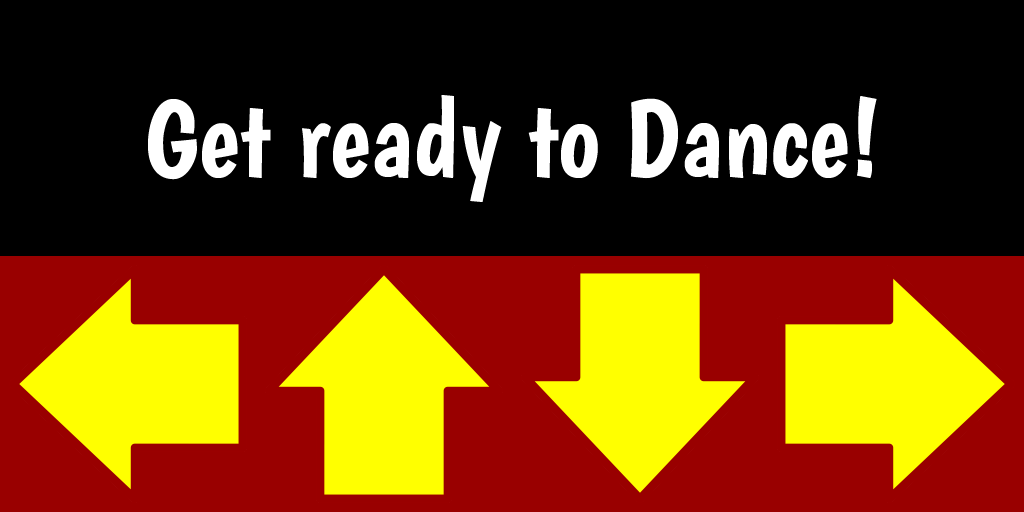
<style>
.page{position:relative;width:1024px;height:512px;background:#000000}
.page>*{position:absolute;margin:0}
.t1{font:110px "Boogaloo-Regular";color:#ffffff}
</style>
<div class="page">
<p class="t1" style="left:148px;top:95px;width:729px;height:107px">Get ready to Dance!</p>
</div>
